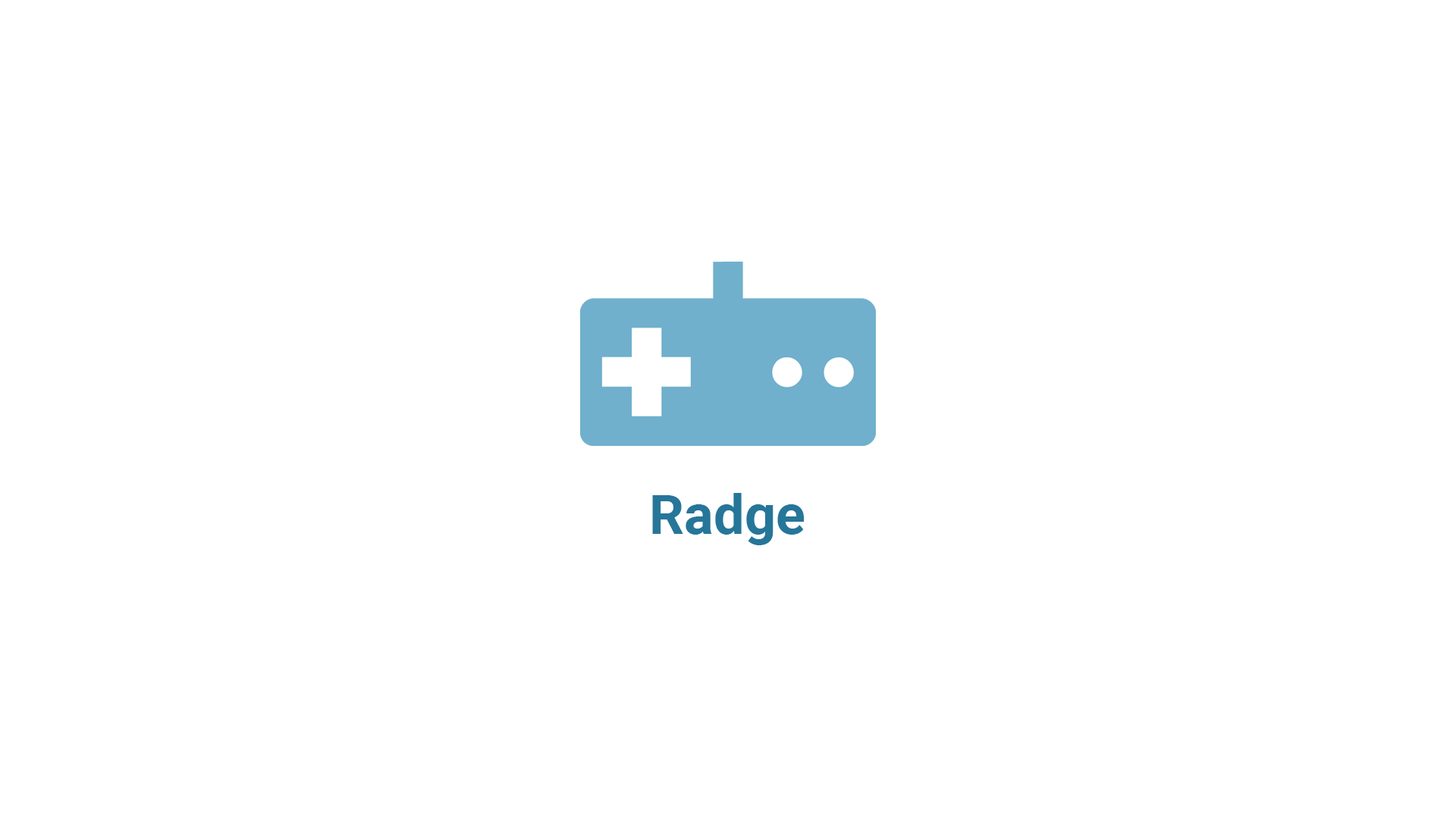
<style>
.page{position:relative;width:1456px;height:819px;background:#ffffff}
.page>*{position:absolute;margin:0}
.t1{font:54.6px "Roboto-Bold";color:#267699}
</style>
<div class="page">
<p class="t1" style="left:652px;top:493px;width:153px;height:52px">Radge</p>
</div>
